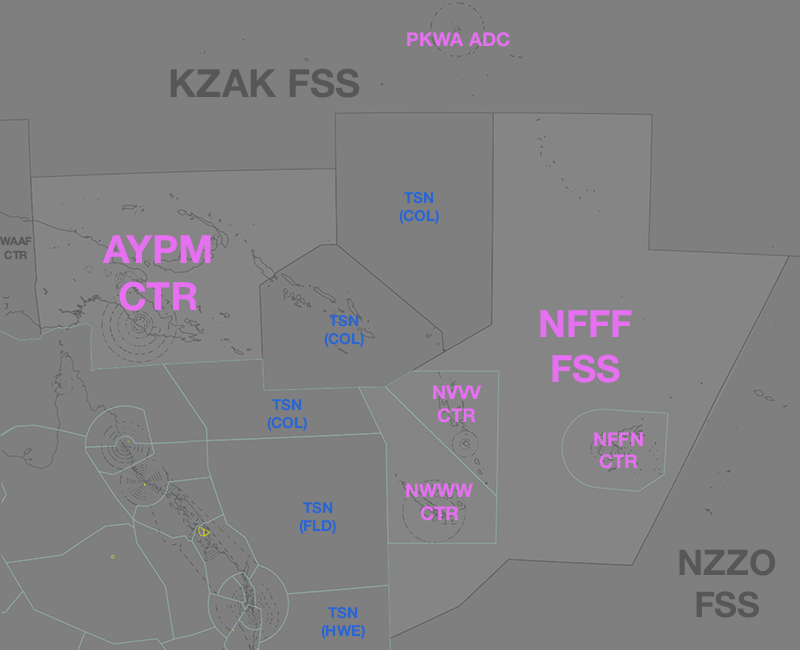
<style>
.page{position:relative;width:800px;height:650px;background:#7f7f7f}
.page>*{position:absolute;margin:0}
.t1{font:19px "HelveticaNeue-Bold";color:#e670f1}
.t2{font:38.9px "HelveticaNeue-Bold";color:#575757}
.t3{font:15.1px "HelveticaNeue-Bold";color:#2967cf}
.t4{font:11.2px "HelveticaNeue-Bold";color:#575757}
.t5{font:38.9px "HelveticaNeue-Bold";color:#e670f1}
.t6{font:37.5px "HelveticaNeue-Bold";color:#e670f1}
.t7{font:35.3px "HelveticaNeue-Bold";color:#575757}
</style>
<div class="page">
<p class="t1" style="left:407px;top:32px;width:103px;height:15px">PKWA ADC</p>
<p class="t2" style="left:170px;top:68px;width:190px;height:30px">KZAK FSS</p>
<p class="t3" style="left:399px;top:191px;width:40px;height:33px;text-align:center">TSN<br>(COL)</p>
<p class="t4" style="left:0px;top:236px;width:32px;height:24px;text-align:center">WAAF<br>CTR</p>
<p class="t5" style="left:102px;top:235px;width:109px;height:76px;text-align:center">AYPM<br>CTR</p>
<p class="t3" style="left:324px;top:314px;width:40px;height:33px;text-align:center">TSN<br>(COL)</p>
<p class="t6" style="left:540px;top:310px;width:92px;height:73px;text-align:center">NFFF<br>FSS</p>
<p class="t1" style="left:433px;top:385px;width:48px;height:38px;text-align:center">NVVV<br>CTR</p>
<p class="t3" style="left:267px;top:398px;width:40px;height:33px;text-align:center">TSN<br>(COL)</p>
<p class="t1" style="left:594px;top:432px;width:49px;height:37px;text-align:center">NFFN<br>CTR</p>
<p class="t1" style="left:406px;top:483px;width:67px;height:38px;text-align:center">NWWW<br>CTR</p>
<p class="t3" style="left:299px;top:501px;width:37px;height:33px;text-align:center">TSN<br>(FLD)</p>
<p class="t7" style="left:679px;top:549px;width:96px;height:69px;text-align:center">NZZO<br>FSS</p>
<p class="t3" style="left:321px;top:606px;width:44px;height:33px;text-align:center">TSN<br>(HWE)</p>
</div>
